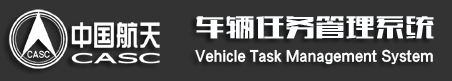
<style>
.page{position:relative;width:452px;height:81px;background:#333333}
.page>*{position:absolute;margin:0}
.t1{font:30px "FZCTHJW--GB1-0";color:#fdfeff}
.t2{font:14.5px "FZCTHJW--GB1-0";color:#fdfeff}
</style>
<div class="page">
<p class="t1" style="left:196px;top:16px;width:238px;height:23px">车辆任务管理系统</p>
<p class="t2" style="left:195px;top:49px;width:238px;height:16px">Vehicle Task Management System</p>
</div>
